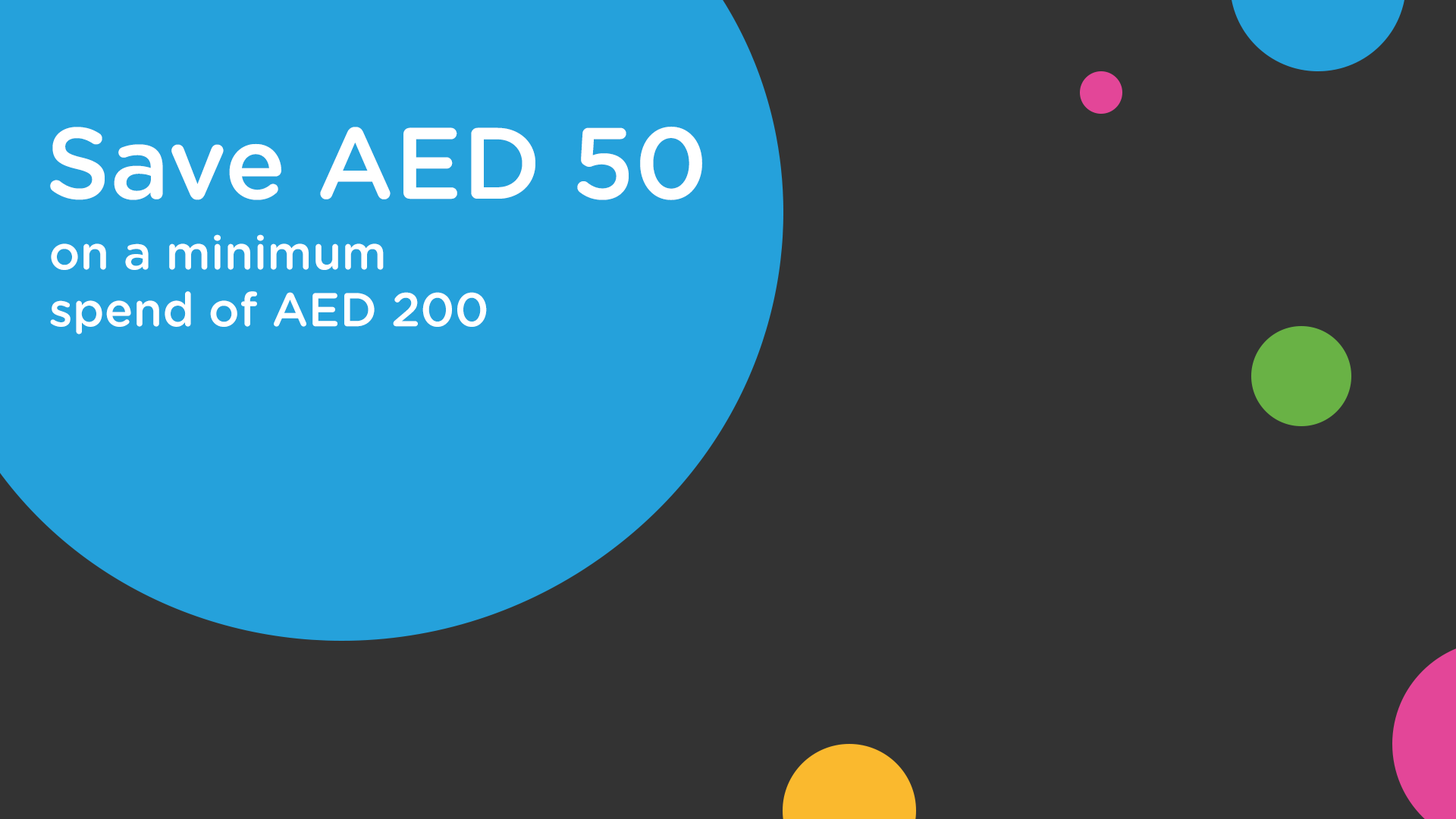
<style>
.page{position:relative;width:1456px;height:819px;background:#333333}
.page>*{position:absolute;margin:0}
.t1{font:101.1px "GothamRounded-Medium";color:#ffffff}
.t2{font:47.4px "GothamRounded-Medium";color:#ffffff}
</style>
<div class="page">
<p class="t1" style="left:50px;top:127px;width:652px;height:73px">Save AED 50</p>
<p class="t2" style="left:50px;top:234px;width:437px;height:100px">on a minimum <br>spend of AED 200</p>
</div>
